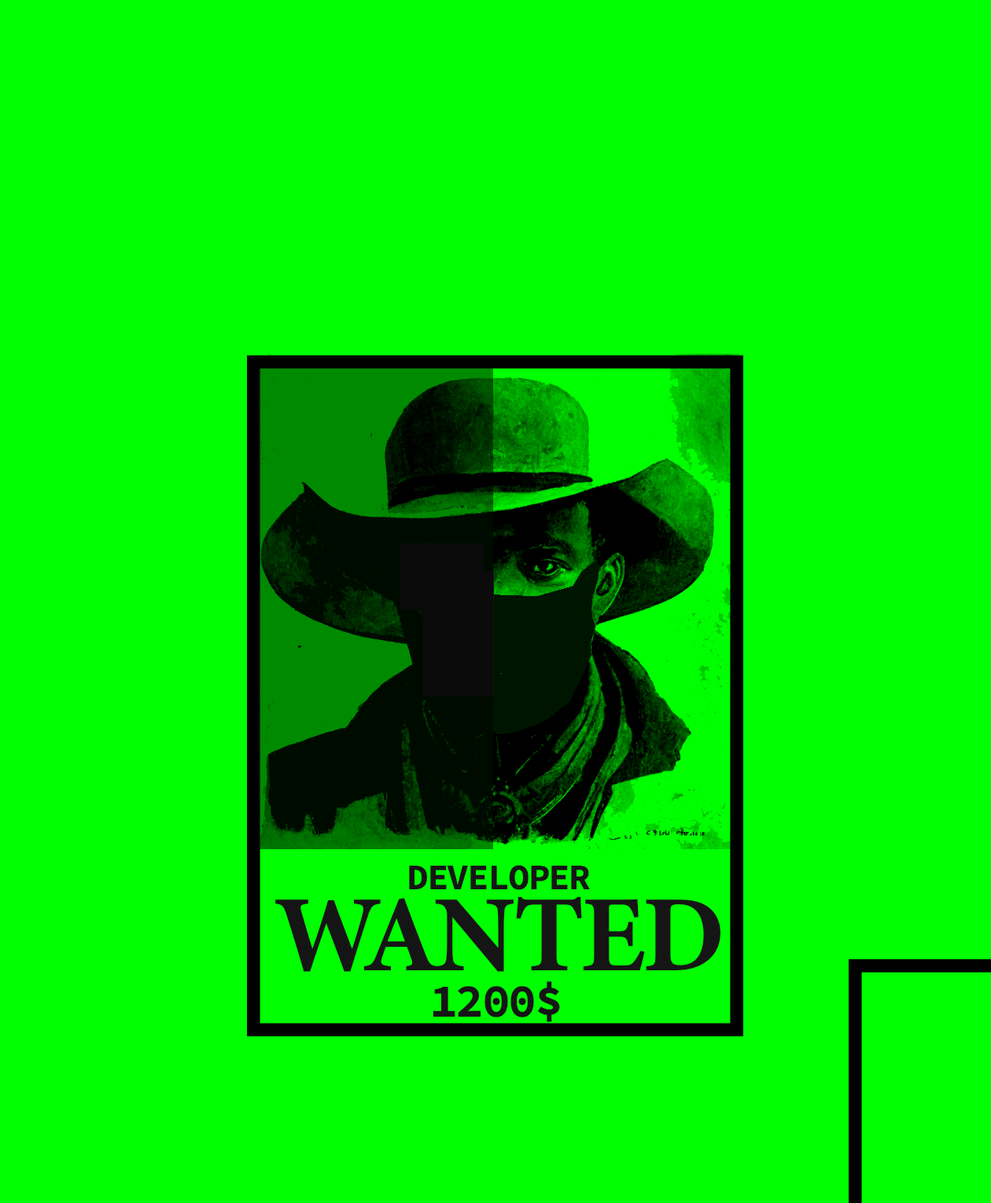
<style>
.page{position:relative;width:991px;height:1203px;background:#00ff00}
.page>*{position:absolute;margin:0}
.t1{font:36.2px "SourceCodeRoman-Bold";letter-spacing:-0.04em;color:#151515;font-weight:bold;font-style:italic}
.t2{font:108.7px "MinionConceptRoman-Bold";letter-spacing:-0.04em;color:#151515;font-weight:bold;font-style:italic}
.t3{font:47.2px "SourceCodeRoman-Bold";letter-spacing:-0.04em;color:#151515;font-weight:bold;font-style:italic}
</style>
<div class="page">
<p class="t1" style="left:409px;top:865px;width:181px;height:25px">DEVELOPER</p>
<p class="t2" style="left:275px;top:897px;width:445px;height:75px">WANTED</p>
<p class="t3" style="left:433px;top:982px;width:127px;height:40px">1200$</p>
</div>
